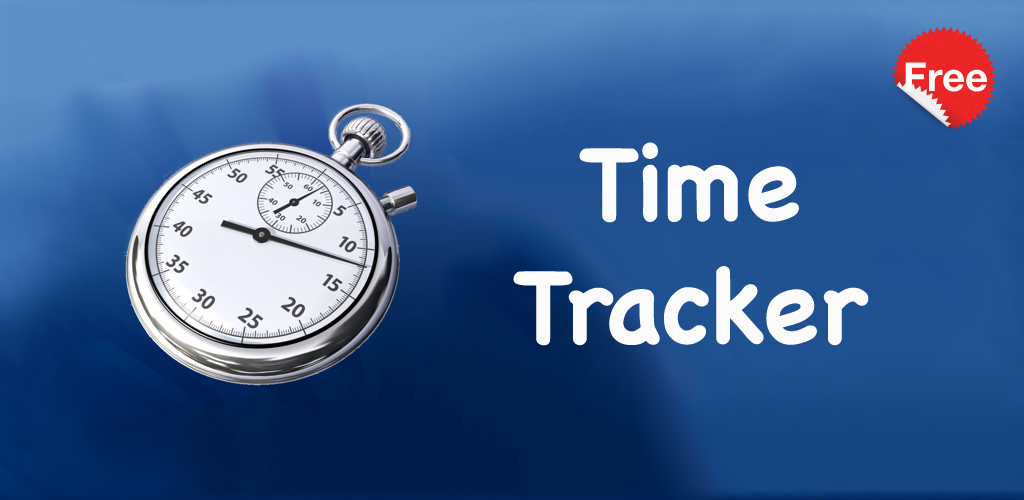
<style>
.page{position:relative;width:1024px;height:500px}
.page>*{position:absolute;margin:0}
.t1{font:102px "Chalkboard-Bold";color:#fbfbfb}
</style>
<div class="page">
<p class="t1" style="left:513px;top:142px;width:356px;height:204px;text-align:center">Time<br>Tracker</p>
</div>
